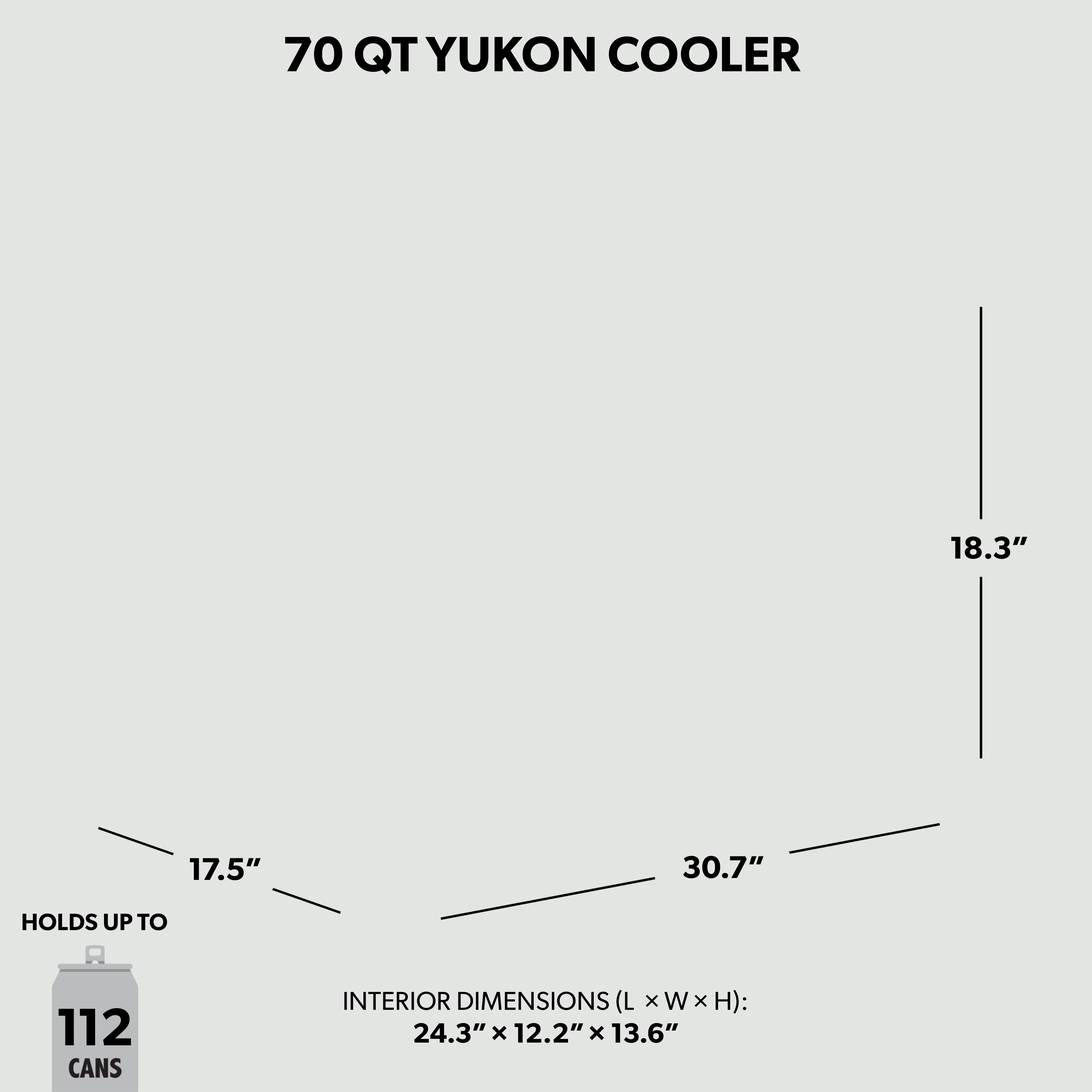
<style>
.page{position:relative;width:1092px;height:1092px;background:#e3e5e3}
.page>*{position:absolute;margin:0}
.t1{font:49.7px "Gibson-SemiBold";color:#000000;text-transform:uppercase}
.t2{font:31.5px "Gibson-SemiBold";color:#000000}
.t3{font:23.7px "Gibson-SemiBold";color:#000000}
.t4{font:26px "Gibson-Regular";color:#000000}
.t5{font:53px "Gibson-SemiBold";color:#000000}
.t6{font:27.9px "Gibson-SemiBold";color:#000000}
</style>
<div class="page">
<p class="t1" style="left:285px;top:36px;width:516px;height:39px">70 Qt YuKON COOLER</p>
<p class="t2" style="left:951px;top:536px;width:76px;height:23px">18.3”</p>
<p class="t2" style="left:683px;top:856px;width:81px;height:23px">30.7”</p>
<p class="t2" style="left:190px;top:858px;width:71px;height:22px">17.5”</p>
<p class="t3" style="left:22px;top:913px;width:145px;height:17px">HOLDS UP TO</p>
<p class="t4" style="left:344px;top:990px;width:402px;height:24px">INTERIOR DIMENSIONS (L  × W × H):</p>
<p class="t5" style="left:58px;top:1008px;width:73px;height:37px">112</p>
<p class="t6" style="left:414px;top:1023px;width:264px;height:20px">24.3” × 12.2” × 13.6”</p>
</div>
